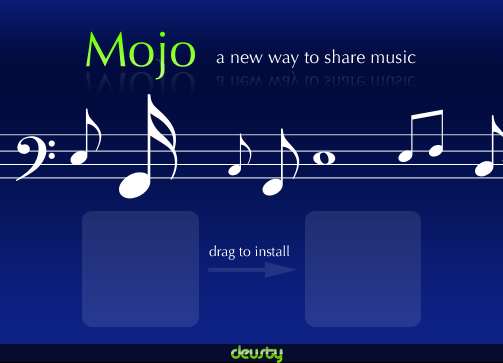
<style>
.page{position:relative;width:503px;height:363px}
.page>*{position:absolute;margin:0}
.t1{font:49.6px "Optima-Regular"}
.t2{font:18px "Optima-Regular";color:#ffffff}
.t3{font:19.7px "Optima-Regular";color:#19224f;scale:0.91 1}
.t4{font:13.9px "Optima-Regular";color:#ffffff}
</style>
<div class="page">
<p class="t1" style="left:86px;top:31px;width:109px;height:49px">Mojo</p>
<p class="t2" style="left:216px;top:49px;width:200px;height:19px">a new way to share music</p>
<p class="t3" style="left:216px;top:71px;width:200px;height:21px">a new way to share music</p>
<p class="t4" style="left:209px;top:245px;width:80px;height:15px">drag to install</p>
</div>
